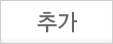
<style>
.page{position:relative;width:113px;height:44px;background:#ffffff}
.page>*{position:absolute;margin:0}
.t1{font:23px "YDVYGO33";color:#666666;scale:0.95 1}
</style>
<div class="page">
<p class="t1" style="left:37px;top:11px;width:41px;height:22px">추가</p>
</div>
